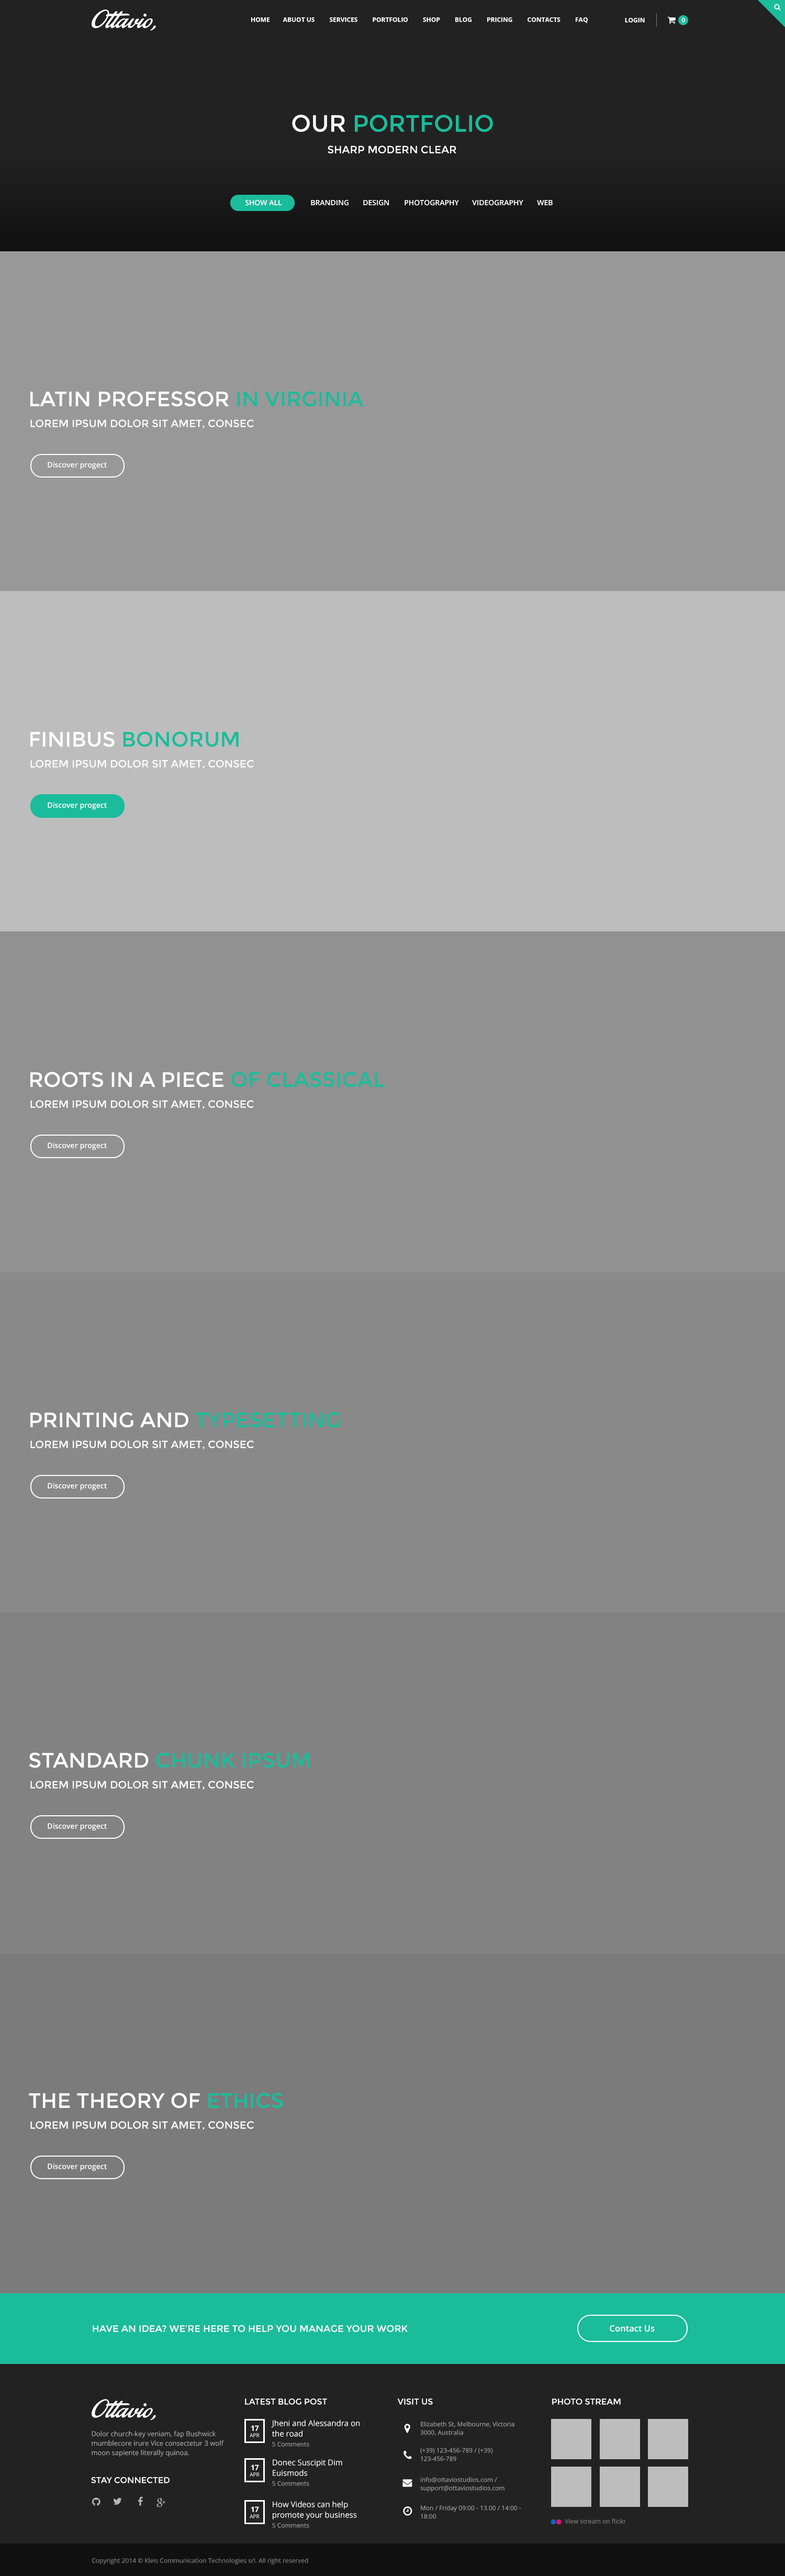
<style>
.page{position:relative;width:785px;height:2576px}
.page>*{position:absolute;margin:0}
.t1{font:6.3px "OpenSans-Bold";color:#ffffff;text-transform:uppercase}
.t2{font:6.3px "OpenSans-Semibold";color:#ffffff;text-transform:uppercase}
.t3{font:23.6px "Montserrat-Regular";color:#1abc9c;text-transform:uppercase}
.t4{font:23.6px "Montserrat-Regular";color:#ffffff;text-transform:uppercase}
.t5{font:10.5px "Montserrat-Regular";color:#ffffff;text-transform:uppercase}
.t6{font:7.3px "OpenSans-Semibold";color:#ffffff}
.t7{font:7.3px "OpenSans-Semibold";color:#ffffff;text-transform:uppercase}
.t8{font:20.9px "Montserrat-Regular";color:#ffffff;text-transform:uppercase}
.t9{font:20.9px "Montserrat-Regular";color:#1abc9c;text-transform:uppercase}
.t10{font:7.5px "OpenSans-Semibold";color:#ffffff}
.t11{font:9.4px "Montserrat-Regular";color:#ffffff;text-transform:uppercase}
.t12{font:8.7px "OpenSans-Semibold";color:#ffffff}
.t13{font:8.4px "Montserrat-Regular";color:#ffffff;text-transform:uppercase}
.t14{font:7.3px "OpenSans-Bold";color:#ffffff;text-transform:uppercase}
.t15{font:7.9px/10.5px "OpenSans";color:#ffffff}
.t16{font:6.3px/8.4px "OpenSans";color:#a8a8a8}
.t17{font:6.8px/9.4px "OpenSans";color:#a8a8a8}
.t18{font:5.2px "OpenSans";color:#ffffff;text-transform:uppercase}
.t19{font:6.3px "OpenSans";color:#a9a9a9}
.t20{font:6.3px "OpenSans";color:#878787}
</style>
<div class="page">
<p class="t1" style="left:251px;top:17px;width:337px;height:6px">Home        Abuot us         Services         Portfolio         Shop         Blog         Pricing         Contacts         Faq</p>
<p class="t1" style="left:625px;top:18px;width:20px;height:5px">Login</p>
<p class="t2" style="left:682px;top:18px;width:3px;height:5px">0</p>
<p class="t3" style="left:292px;top:115px;width:201px;height:17px"><span class="t4">Our </span>portfolio</p>
<p class="t5" style="left:328px;top:146px;width:129px;height:7px">SHARP MODERN CLEAR</p>
<p class="t6" style="left:246px;top:199px;width:36px;height:7px">SHOW ALL</p>
<p class="t7" style="left:311px;top:199px;width:38px;height:7px">Branding</p>
<p class="t7" style="left:363px;top:199px;width:26px;height:7px">Design</p>
<p class="t7" style="left:405px;top:199px;width:54px;height:7px">Photography</p>
<p class="t7" style="left:472px;top:199px;width:52px;height:7px">Videography</p>
<p class="t7" style="left:537px;top:200px;width:16px;height:5px">Web</p>
<p class="t8" style="left:30px;top:391px;width:334px;height:16px">Latin professor <span class="t9">in Virginia</span></p>
<p class="t5" style="left:30px;top:419px;width:224px;height:9px">Lorem ipsum dolor sit amet, consec</p>
<p class="t10" style="left:48px;top:462px;width:59px;height:8px">Discover progect</p>
<p class="t8" style="left:30px;top:731px;width:209px;height:16px">Finibus <span class="t9">Bonorum</span></p>
<p class="t5" style="left:30px;top:760px;width:224px;height:9px">Lorem ipsum dolor sit amet, consec</p>
<p class="t10" style="left:48px;top:802px;width:59px;height:8px">Discover progect</p>
<p class="t8" style="left:30px;top:1072px;width:354px;height:15px">roots in a piece <span class="t9">of classical</span></p>
<p class="t5" style="left:30px;top:1100px;width:224px;height:9px">Lorem ipsum dolor sit amet, consec</p>
<p class="t10" style="left:48px;top:1142px;width:59px;height:8px">Discover progect</p>
<p class="t8" style="left:30px;top:1412px;width:310px;height:16px">printing and <span class="t9">typesetting</span></p>
<p class="t5" style="left:30px;top:1440px;width:224px;height:9px">Lorem ipsum dolor sit amet, consec</p>
<p class="t10" style="left:48px;top:1483px;width:59px;height:8px">Discover progect</p>
<p class="t9" style="left:29px;top:1752px;width:281px;height:16px"><span class="t8">standard </span>chunk Ipsum</p>
<p class="t5" style="left:30px;top:1781px;width:224px;height:9px">Lorem ipsum dolor sit amet, consec</p>
<p class="t10" style="left:48px;top:1823px;width:59px;height:8px">Discover progect</p>
<p class="t8" style="left:29px;top:2093px;width:254px;height:15px">the theory of <span class="t9">ethics</span></p>
<p class="t5" style="left:30px;top:2121px;width:224px;height:9px">Lorem ipsum dolor sit amet, consec</p>
<p class="t10" style="left:48px;top:2163px;width:59px;height:8px">Discover progect</p>
<p class="t11" style="left:93px;top:2325px;width:315px;height:7px">HAVE AN IDEA? WE’RE HERE TO HELP YOU MANAGE YOUR WORK</p>
<p class="t12" style="left:610px;top:2325px;width:45px;height:7px">Contact Us</p>
<p class="t13" style="left:245px;top:2399px;width:82px;height:6px">Latest blog post</p>
<p class="t13" style="left:397px;top:2399px;width:36px;height:6px">Visit US</p>
<p class="t13" style="left:552px;top:2399px;width:69px;height:6px">Photo stream</p>
<p class="t14" style="left:251px;top:2425px;width:8px;height:6px">17</p>
<p class="t15" style="left:271px;top:2420px;width:89px;height:17px">Jheni and Alessandra on <br>the road</p>
<p class="t16" style="left:420px;top:2422px;width:95px;height:14px">Elizabeth St, Melbourne, Victoria 3000, Australia</p>
<p class="t17" style="left:92px;top:2431px;width:132px;height:26px">Dolor church-key veniam, fap Bushwick mumblecore irure Vice consectetur 3 wolf moon sapiente literally quinoa.</p>
<p class="t18" style="left:250px;top:2433px;width:10px;height:4px">apr</p>
<p class="t19" style="left:272px;top:2442px;width:37px;height:5px">5 Comments</p>
<p class="t16" style="left:420px;top:2448px;width:73px;height:13px">(+39) 123-456-789 / (+39) 123-456-789</p>
<p class="t14" style="left:251px;top:2464px;width:8px;height:6px">17</p>
<p class="t15" style="left:273px;top:2459px;width:69px;height:17px">Donec Suscipit Dim <br>Euismods</p>
<p class="t13" style="left:91px;top:2477px;width:79px;height:6px">Stay connected</p>
<p class="t18" style="left:250px;top:2472px;width:10px;height:5px">apr</p>
<p class="t16" style="left:420px;top:2477px;width:85px;height:15px">info@ottaviostudios.com / support@ottaviostudios.com</p>
<p class="t19" style="left:272px;top:2481px;width:37px;height:5px">5 Comments</p>
<p class="t15" style="left:273px;top:2501px;width:84px;height:18px">How Videos can help <br>promote your business</p>
<p class="t14" style="left:251px;top:2506px;width:8px;height:6px">17</p>
<p class="t16" style="left:421px;top:2505px;width:100px;height:14px">Mon / Friday 09:00 - 13.00 / 14:00 - 18:00</p>
<p class="t18" style="left:250px;top:2514px;width:10px;height:4px">apr</p>
<p class="t19" style="left:272px;top:2523px;width:37px;height:5px">5 Comments</p>
<p class="t20" style="left:565px;top:2518px;width:61px;height:6px">View stream on flickr</p>
<p class="t20" style="left:92px;top:2558px;width:216px;height:6px">Copyright 2014 © Kleis Communication Technologies srl. All right reserved</p>
</div>
